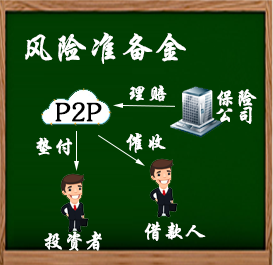
<style>
.page{position:relative;width:273px;height:265px;background:#003d01}
.page>*{position:absolute;margin:0}
.t1{font:33.3px "FZXKJW--GB1-0";letter-spacing:0.01em;color:#ffffff;font-weight:bold;scale:0.97 1}
.t2{font:20.8px "FZXKJW--GB1-0";letter-spacing:0.01em;color:#ffffff;font-weight:bold;scale:0.97 1}
.t3{font:25px "FZXKJW--GB1-0";letter-spacing:0.01em;color:#000000;font-weight:bold;scale:0.97 1}
</style>
<div class="page">
<p class="t1" style="left:25px;top:32px;width:161px;height:32px">风险准备金</p>
<p class="t2" style="left:129px;top:85px;width:38px;height:17px">理赔</p>
<p class="t2" style="left:216px;top:89px;width:41px;height:35px">保险<br>公司</p>
<p class="t3" style="left:55px;top:102px;width:47px;height:20px">P2P</p>
<p class="t2" style="left:36px;top:137px;width:37px;height:19px">垫付</p>
<p class="t2" style="left:126px;top:133px;width:40px;height:20px">催收</p>
<p class="t2" style="left:144px;top:221px;width:62px;height:20px">借款人</p>
<p class="t2" style="left:44px;top:231px;width:58px;height:20px">投资者</p>
</div>
